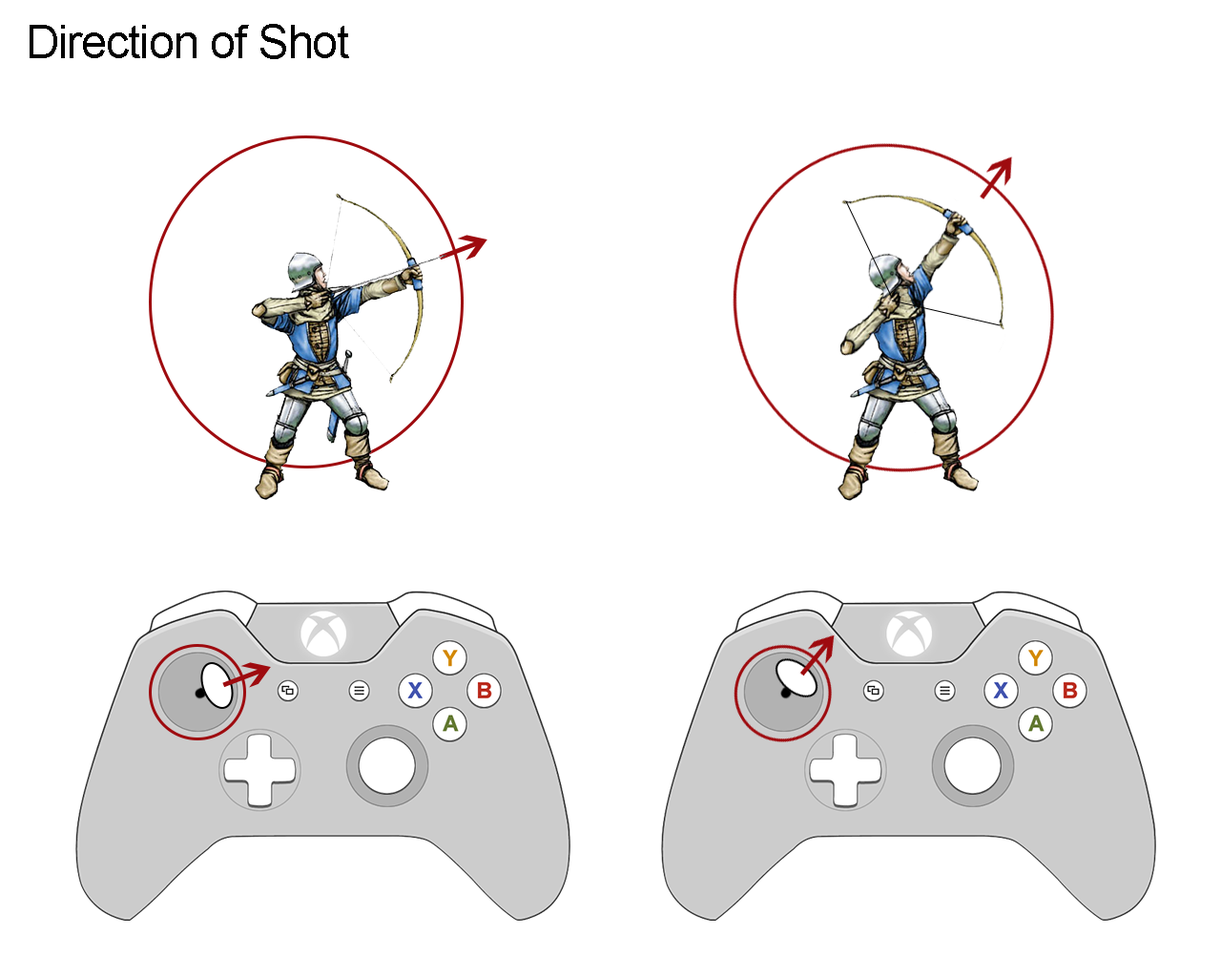
<style>
.page{position:relative;width:1221px;height:977px;background:#ffffff}
.page>*{position:absolute;margin:0}
.t1{font:45.8px "ArialMT";letter-spacing:-0.02em;color:#000000}
</style>
<div class="page">
<p class="t1" style="left:30px;top:24px;width:319px;height:35px">Direction of Shot</p>
</div>
